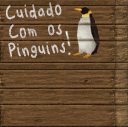
<style>
.page{position:relative;width:128px;height:127px}
.page>*{position:absolute;margin:0}
.t1{font:24.6px/19.1px "My_Unprofessional_Handwriting";letter-spacing:0.08em;color:#cec7c2;font-weight:bold;scale:0.76 1}
</style>
<div class="page">
<p class="t1" style="left:6px;top:2px;width:60px;height:56px;text-align:center;rotate:-5deg">Cuidado<br>Com os<br>Pinguins</p>
</div>
